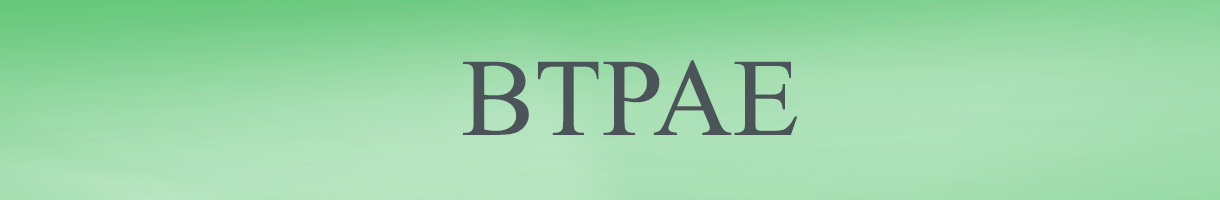
<style>
.page{position:relative;width:1220px;height:200px}
.page>*{position:absolute;margin:0}
.t1{font:110px "MongolianBaiti";color:#4b5458}
</style>
<div class="page">
<p class="t1" style="left:463px;top:60px;width:335px;height:75px">BTPAE</p>
</div>
